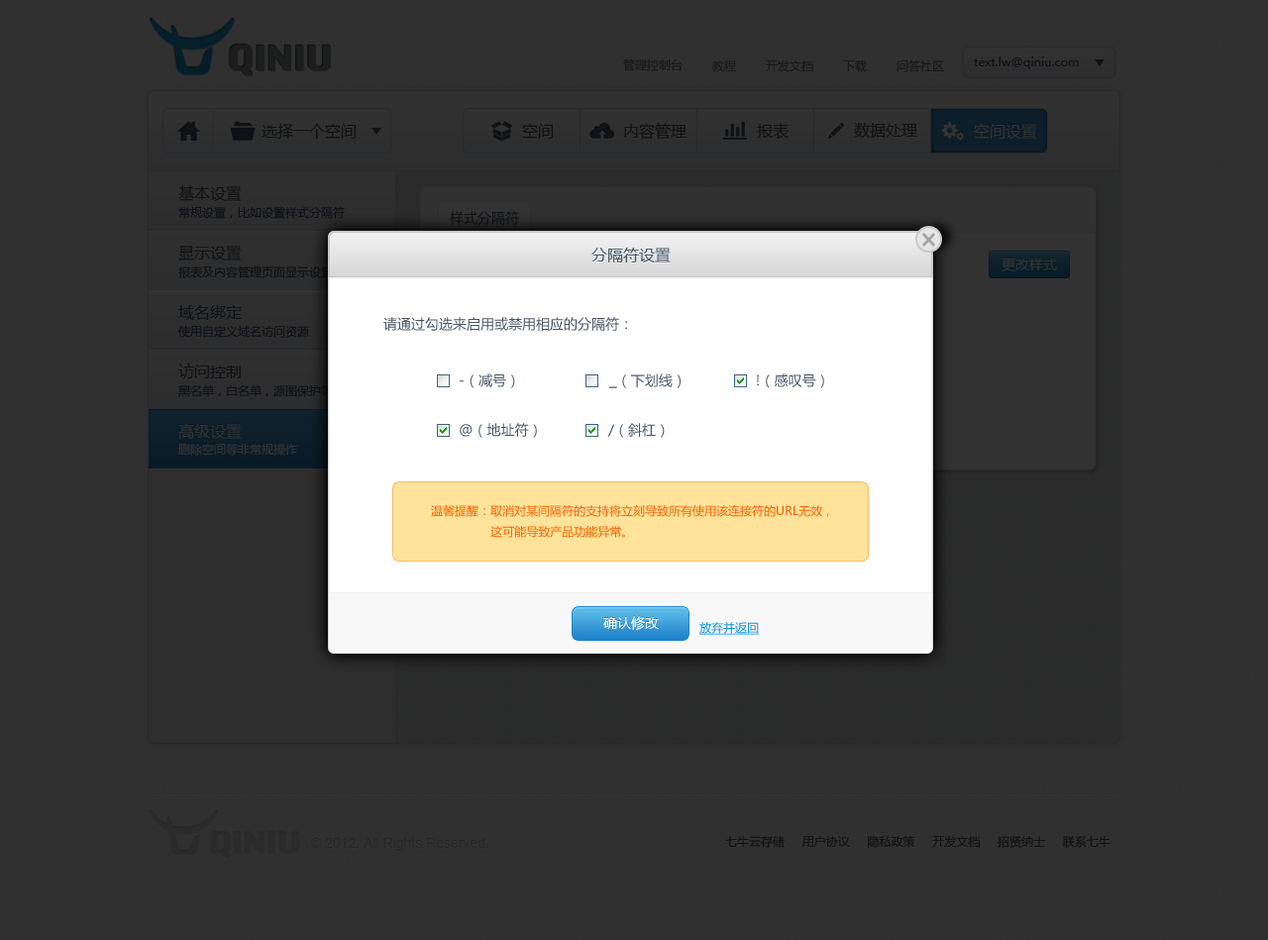
<style>
.page{position:relative;width:1268px;height:940px;background:#303030}
.page>*{position:absolute;margin:0}
.t1{font:11.9px "MicrosoftYaHei";color:#181818}
.t2{font:11.9px "MicrosoftYaHei";color:#0e1115}
.t3{font:15.9px "MicrosoftYaHei";color:#0e1115}
.t4{font:15.9px "MicrosoftYaHei";color:#333333}
.t5{font:13.9px "MicrosoftYaHei";color:#0e1115}
.t6{font:15.9px "MicrosoftYaHei";color:#465567}
.t7{font:13.9px "MicrosoftYaHei";color:#333333}
.t8{font:13.9px "MicrosoftYaHei";color:#465567}
.t9{font:13.9px "ArialMT";color:#465567}
.t10{font:11.9px "MicrosoftYaHei";color:#333333}
.t11{font:11.9px "MicrosoftYaHei";color:#ff6000}
.t12{font:13.9px "MicrosoftYaHei";color:#ffffff}
.t13{font:11.9px "MicrosoftYaHei";color:#0c94de;text-decoration:underline}
.t14{font:13.9px "ArialMT";color:#212121}
.t15{font:11.9px "MicrosoftYaHei";color:#121212}
</style>
<div class="page">
<p class="t1" style="left:623px;top:58px;width:60px;height:13px">管理控制台</p>
<p class="t1" style="left:712px;top:60px;width:25px;height:12px">教程</p>
<p class="t1" style="left:766px;top:59px;width:47px;height:13px">开发文档</p>
<p class="t1" style="left:843px;top:59px;width:24px;height:13px">下载</p>
<p class="t1" style="left:897px;top:59px;width:47px;height:13px">问答社区</p>
<p class="t2" style="left:974px;top:56px;width:105px;height:13px">text.lw@qiniu.com</p>
<p class="t3" style="left:262px;top:123px;width:95px;height:17px">选择一个空间</p>
<p class="t3" style="left:522px;top:123px;width:32px;height:16px">空间</p>
<p class="t3" style="left:624px;top:123px;width:63px;height:17px">内容管理</p>
<p class="t3" style="left:757px;top:123px;width:32px;height:17px">报表</p>
<p class="t3" style="left:854px;top:122px;width:63px;height:17px">数据处理</p>
<p class="t4" style="left:974px;top:123px;width:63px;height:16px">空间设置</p>
<p class="t3" style="left:178px;top:185px;width:64px;height:16px">基本设置</p>
<p class="t2" style="left:178px;top:206px;width:167px;height:13px">常规设置，比如设置样式分隔符</p>
<p class="t5" style="left:450px;top:211px;width:69px;height:14px">样式分隔符</p>
<p class="t3" style="left:178px;top:246px;width:64px;height:15px">显示设置</p>
<p class="t6" style="left:591px;top:248px;width:80px;height:15px">分隔符设置</p>
<p class="t7" style="left:1002px;top:258px;width:55px;height:13px">更改样式</p>
<p class="t3" style="left:178px;top:305px;width:64px;height:15px">域名绑定</p>
<p class="t8" style="left:383px;top:317px;width:244px;height:14px">请通过勾选来启用或禁用相应的分隔符：</p>
<p class="t2" style="left:177px;top:325px;width:132px;height:13px">使用自定义域名访问资源</p>
<p class="t3" style="left:178px;top:364px;width:63px;height:15px">访问控制</p>
<p class="t8" style="left:460px;top:374px;width:55px;height:14px">-（减号）</p>
<p class="t8" style="left:608px;top:374px;width:73px;height:14px"><span class="t9">_</span>（下划线）</p>
<p class="t8" style="left:757px;top:374px;width:67px;height:14px">!（感叹号）</p>
<p class="t4" style="left:178px;top:423px;width:64px;height:16px">高级设置</p>
<p class="t8" style="left:460px;top:423px;width:77px;height:15px">@（地址符）</p>
<p class="t8" style="left:607px;top:423px;width:58px;height:15px">/（斜杠）</p>
<p class="t10" style="left:178px;top:443px;width:119px;height:13px">删除空间等非常规操作</p>
<p class="t11" style="left:431px;top:504px;width:398px;height:34px">温馨提醒：取消对某间隔符的支持将立刻导致所有使用该连接符的URL无效，<br>                 这可能导致产品功能异常。</p>
<p class="t12" style="left:603px;top:616px;width:56px;height:15px">确认修改</p>
<p class="t13" style="left:699px;top:622px;width:61px;height:13px">放弃并返回</p>
<p class="t14" style="left:310px;top:837px;width:178px;height:14px">© 2012. All Rights Reserved.</p>
<p class="t15" style="left:725px;top:835px;width:386px;height:13px">七牛云存储     用户协议     隐私政策     开发文档     招贤纳士     联系七牛</p>
</div>
